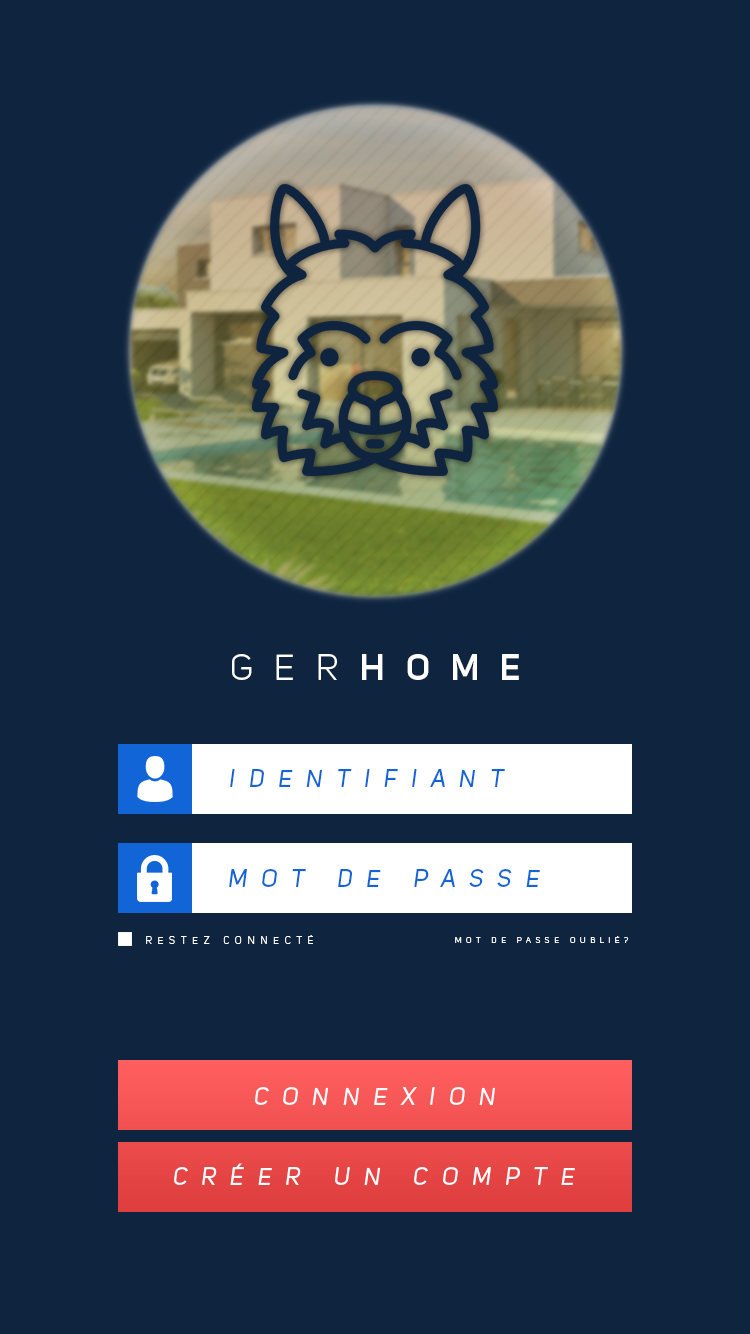
<style>
.page{position:relative;width:750px;height:1334px;background:#0f253f}
.page>*{position:absolute;margin:0}
.t1{font:36px "UniSansBook";letter-spacing:0.585em;color:#ffffff;text-transform:uppercase}
.t2{font:36px "UniSansSemiBold";letter-spacing:0.585em;color:#ffffff;text-transform:uppercase}
.t3{font:24px "UniSansRegularItalic";letter-spacing:0.585em;color:#1265d6;text-transform:uppercase}
.t4{font:10px "UniSansBook";letter-spacing:0.585em;color:#ffffff;text-transform:uppercase}
.t5{font:8px "UniSansBook";letter-spacing:0.585em;color:#ffffff;text-transform:uppercase}
.t6{font:24px "UniSansRegularItalic";letter-spacing:0.585em;color:#ffffff;text-transform:uppercase}
</style>
<div class="page">
<p class="t1" style="left:232px;top:654px;width:105px;height:26px">Ger</p>
<p class="t2" style="left:362px;top:654px;width:157px;height:26px">HOME</p>
<p class="t3" style="left:230px;top:769px;width:275px;height:19px">identifiant</p>
<p class="t3" style="left:229px;top:869px;width:311px;height:18px">Mot de passe</p>
<p class="t4" style="left:146px;top:935px;width:167px;height:9px">restez connecté</p>
<p class="t5" style="left:455px;top:936px;width:174px;height:7px">Mot de passe oublié?</p>
<p class="t6" style="left:255px;top:1087px;width:240px;height:19px">Connexion</p>
<p class="t6" style="left:174px;top:1163px;width:401px;height:23px">Créer un compte</p>
</div>
